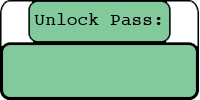
<style>
.page{position:relative;width:200px;height:100px;background:#82ca9c}
.page>*{position:absolute;margin:0}
.t1{font:18px "Courier";color:#000000}
</style>
<div class="page">
<p class="t1" style="left:34px;top:13px;width:127px;height:12px">Unlock Pass:</p>
</div>
